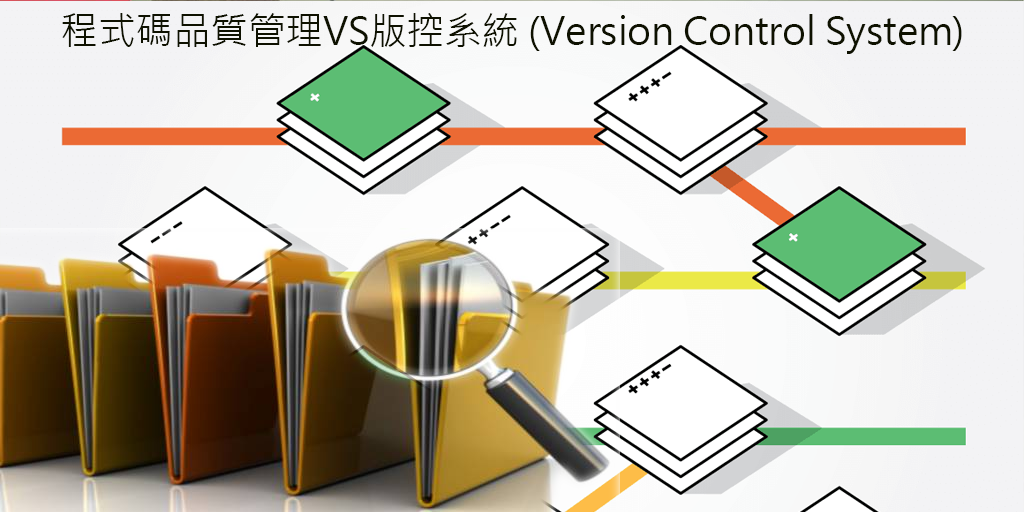
<style>
.page{position:relative;width:1024px;height:512px}
.page>*{position:absolute;margin:0}
.t1{font:37.5px "MicrosoftJhengHeiRegular";color:#0e1100}
</style>
<div class="page">
<p class="t1" style="left:62px;top:13px;width:900px;height:41px">程式碼品質管理VS版控系統 (Version Control System)</p>
</div>
